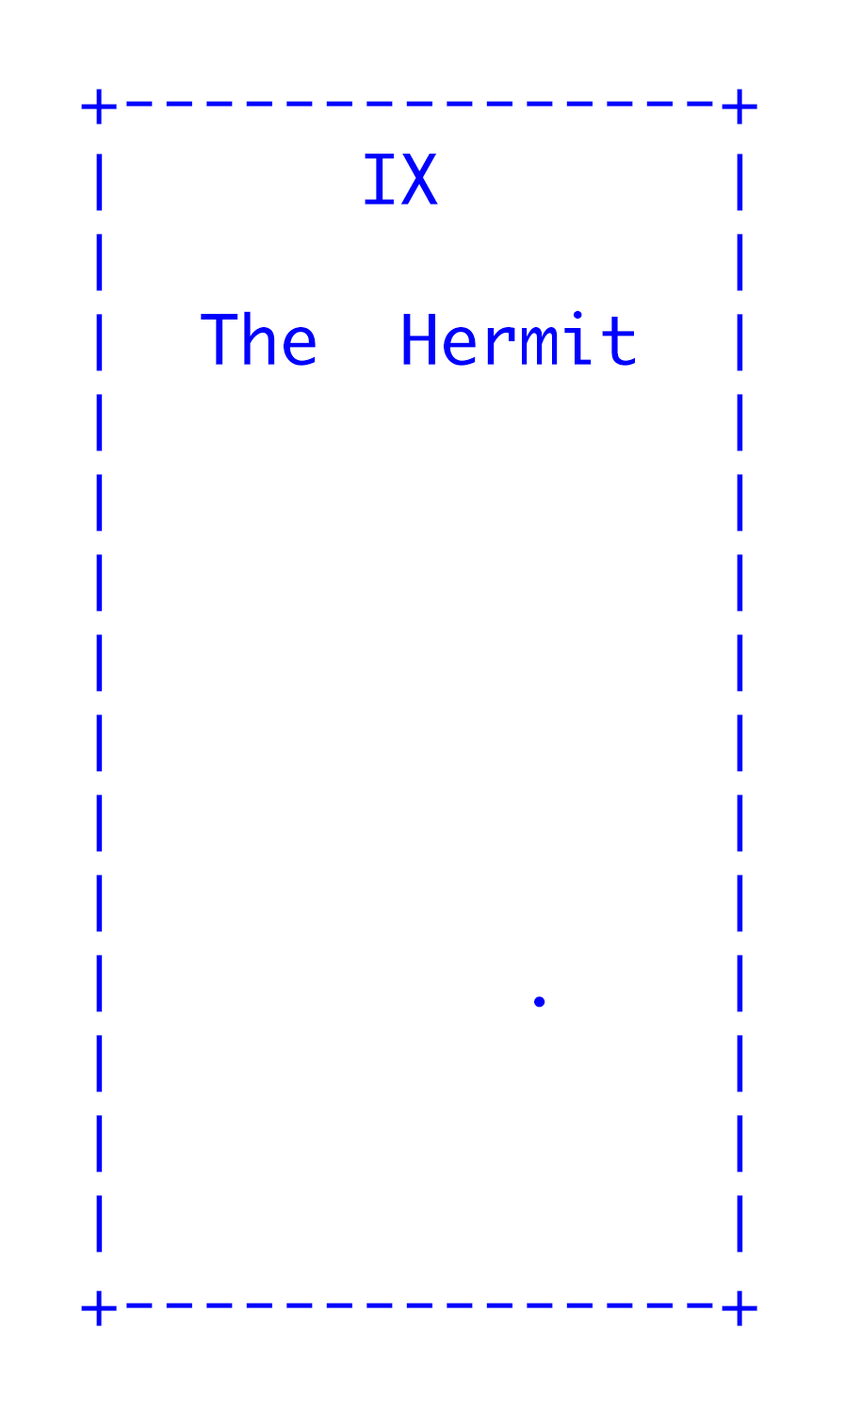
<style>
.page{position:relative;width:845px;height:1411px;background:#ffffff}
.page>*{position:absolute;margin:0}
.t1{font:66.7px "Monaco";color:#0000ff}
</style>
<div class="page">
<p class="t1" style="left:81px;top:89px;width:677px;height:1237px">+---------------+│      IX       │<br>│               │<br>│  The  Hermit  │<br>│               │<br>│               │<br>│               │<br>│               │<br>│               │<br>│               │<br>│               │<br>│          .    │<br>│               │<br>│               │<br>│               │<br>+---------------+<br><br><br><br><br>├───────────────┤</p>
</div>
